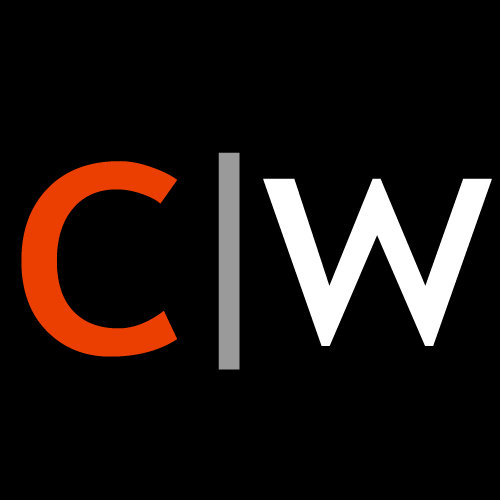
<style>
.page{position:relative;width:500px;height:500px;background:#000000}
.page>*{position:absolute;margin:0}
.t1{font:359.8px "TrebuchetMS";color:#eb3f01}
.t2{font:278.8px "AdobeHeitiStd-Regular";color:#9b9a9a;scale:0.71 1}
.t3{font:312.7px "TrebuchetMS";color:#ffffff}
</style>
<div class="page">
<p class="t1" style="left:21px;top:161px;width:156px;height:196px">c</p>
<p class="t2" style="left:218px;top:152px;width:22px;height:218px">I</p>
<p class="t3" style="left:263px;top:178px;width:229px;height:168px">w</p>
</div>
